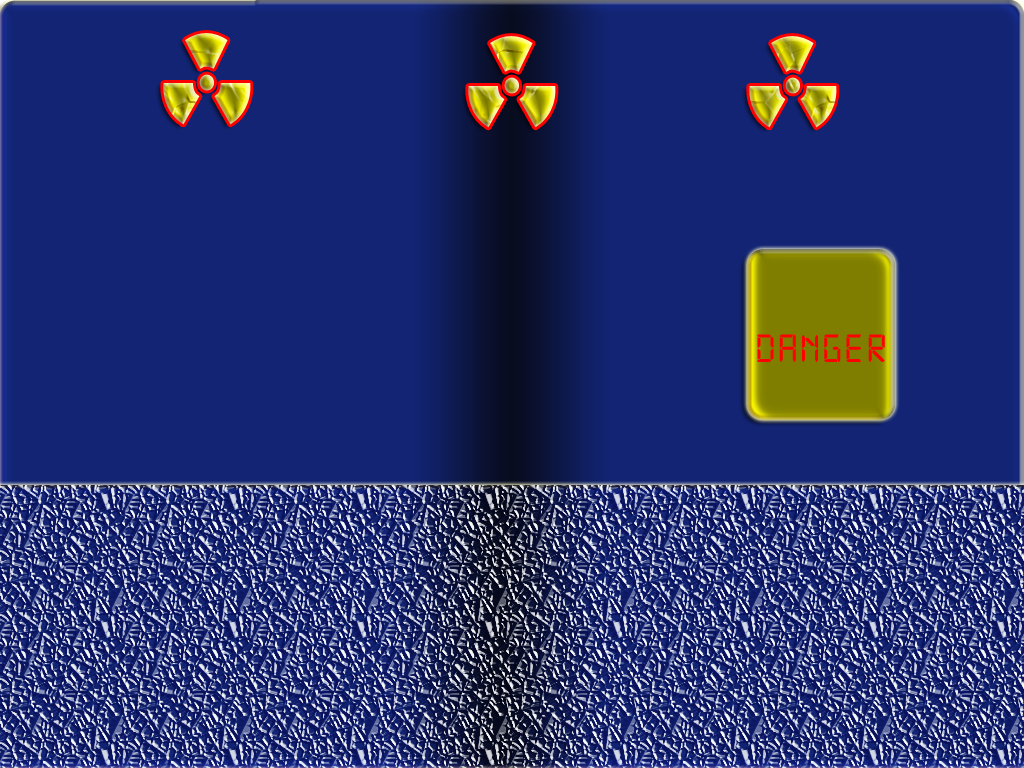
<style>
.page{position:relative;width:1024px;height:768px;background:#122473}
.page>*{position:absolute;margin:0}
.t1{font:42px "Digital-7Mono";letter-spacing:0.075em;color:#ff0000}
</style>
<div class="page">
<p class="t1" style="left:757px;top:334px;width:128px;height:28px">DANGER</p>
</div>
